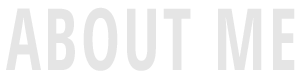
<style>
.page{position:relative;width:300px;height:81px;background:#ffffff}
.page>*{position:absolute;margin:0}
.t1{font:85.7px "OpenSansCondensed-Bold";letter-spacing:0.05em;color:#e5e5e5;scale:0.76 1}
</style>
<div class="page">
<p class="t1" style="left:6px;top:7px;width:289px;height:64px">ABOUT ME</p>
</div>
